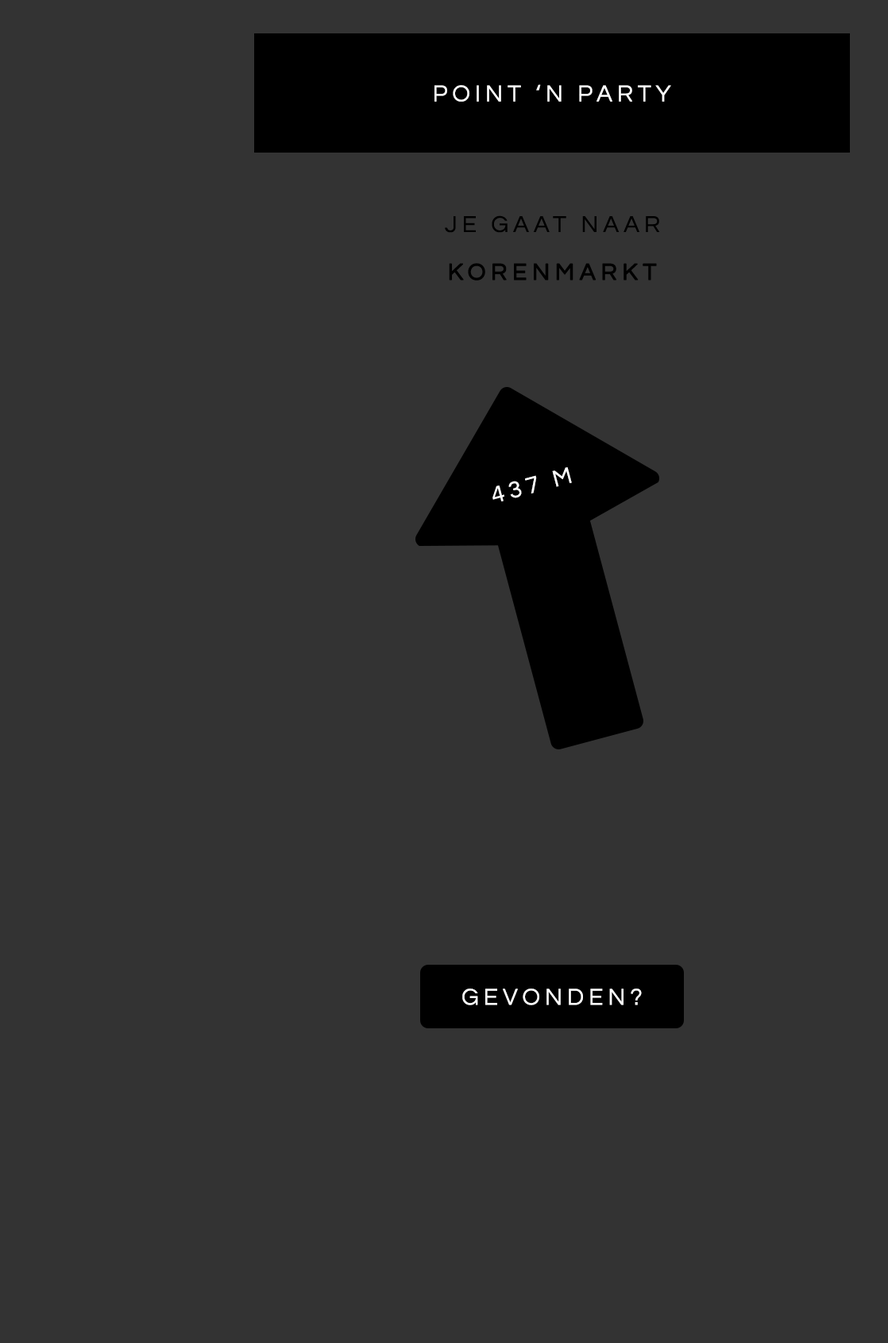
<style>
.page{position:relative;width:888px;height:1343px;background:#333333}
.page>*{position:absolute;margin:0}
.t1{font:23.8px "Questrial-Regular";letter-spacing:0.2em;color:#ffffff;text-transform:uppercase}
.t2{font:23.8px/47.7px "Questrial-Regular";letter-spacing:0.2em;color:#000000;text-transform:uppercase}
.t3{font:23.8px/47.7px "Questrial-Regular";letter-spacing:0.2em;color:#000000;text-transform:uppercase;font-weight:bold}
</style>
<div class="page">
<p class="t1" style="left:435px;top:84px;width:236px;height:18px">Point ‘n party</p>
<p class="t2" style="left:445px;top:215px;width:215px;height:65px;text-align:center">Je gaat naar<br><span class="t3">Korenmarkt</span></p>
<p class="t1" style="left:493px;top:467px;width:79px;height:34px;rotate:-15deg">437 m</p>
<p class="t1" style="left:462px;top:988px;width:180px;height:17px">Gevonden?</p>
</div>
